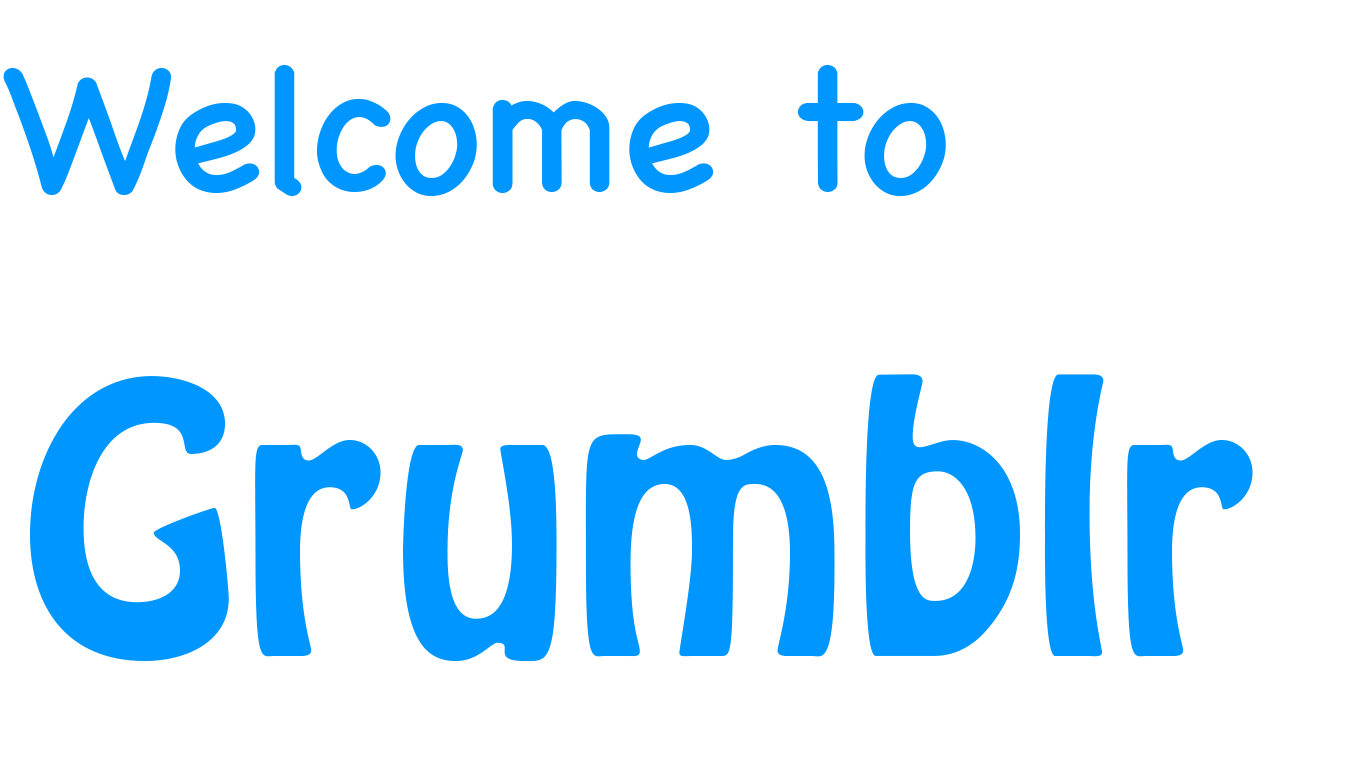
<style>
.page{position:relative;width:1366px;height:768px;background:#ffffff}
.page>*{position:absolute;margin:0}
.t1{font:180px "ChalkboardSE-Regular";color:#0096ff}
.t2{font:330px "HoboStd";color:#0096ff}
</style>
<div class="page">
<p class="t1" style="left:3px;top:65px;width:943px;height:131px">Welcome to</p>
<p class="t2" style="left:30px;top:374px;width:1223px;height:288px">Grumblr</p>
</div>
